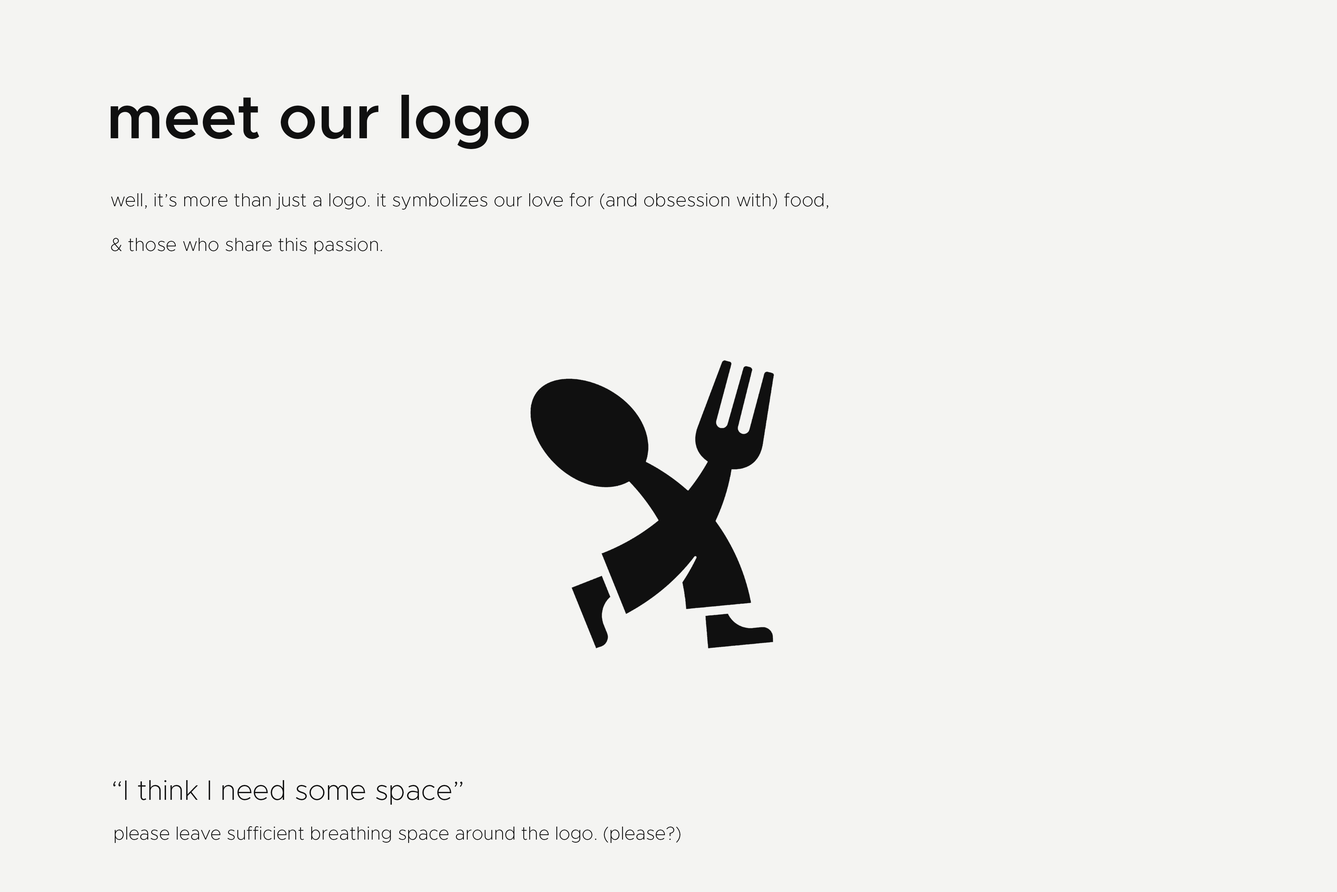
<style>
.page{position:relative;width:1337px;height:892px;background:#f4f4f2}
.page>*{position:absolute;margin:0}
.t1{font:61.9px "Metropolis-SemiBold";color:#101010}
.t2{font:18.6px "Metropolis-ExtraLight";color:#0f0f0f}
.t3{font:27.9px "Metropolis-ExtraLight";color:#0f0f0f}
</style>
<div class="page">
<p class="t1" style="left:111px;top:95px;width:418px;height:54px">meet our logo</p>
<p class="t2" style="left:111px;top:193px;width:717px;height:61px">well, it’s more than just a logo. it symbolizes our love for (and obsession with) food,<br><br>&amp; those who share this passion.</p>
<p class="t3" style="left:113px;top:780px;width:350px;height:24px">“I think I need some space”</p>
<p class="t2" style="left:115px;top:826px;width:566px;height:17px">please leave sufficient breathing space around the logo. (please?)</p>
</div>
